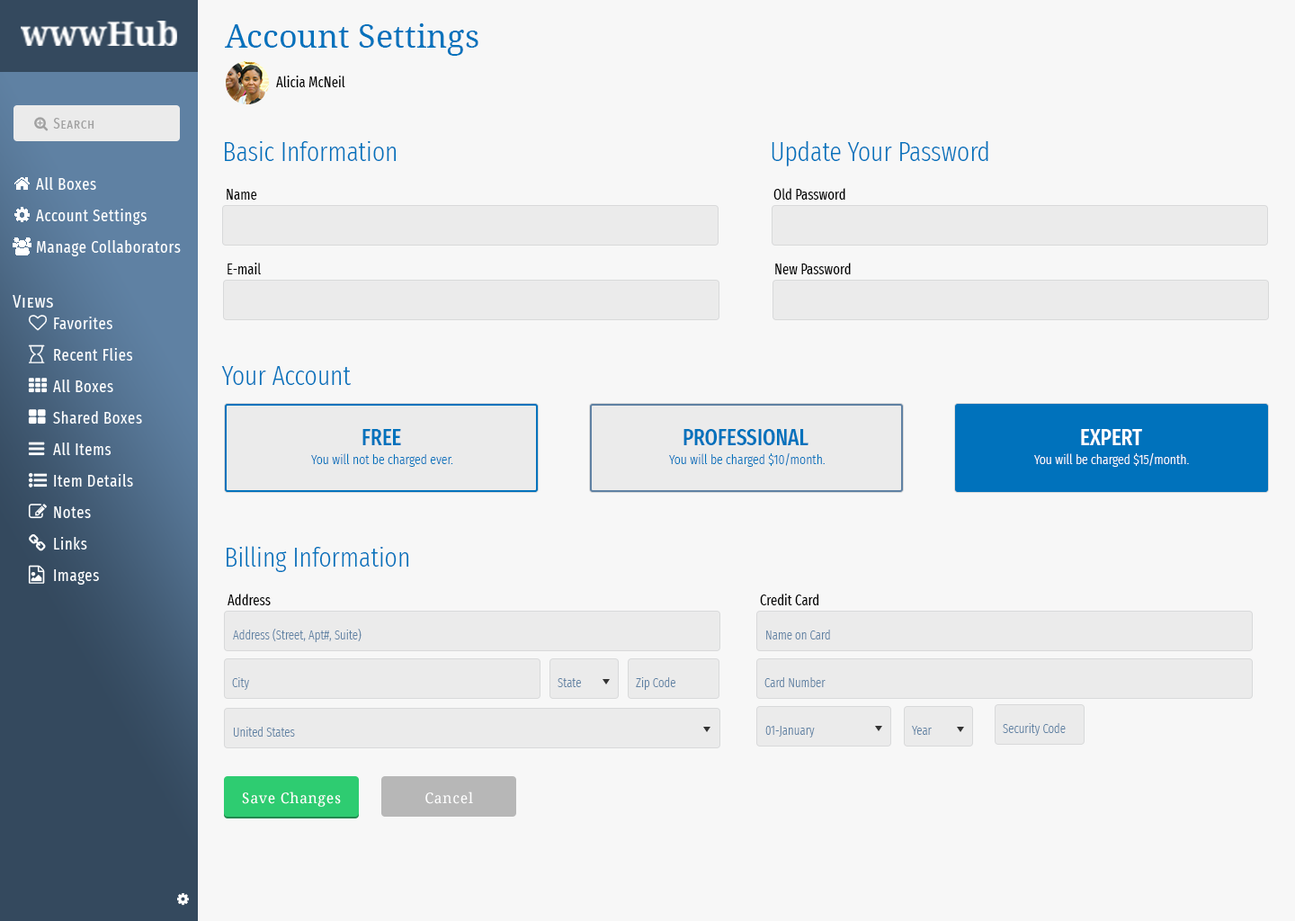
<style>
.page{position:relative;width:1295px;height:921px;background:#f7f7f7}
.page>*{position:absolute;margin:0}
.t1{font:32.4px "DroidSerif";color:#0072bc}
.t2{font:14.4px "FiraSansExtraCondensed-Regular";color:#000000}
.t3{font:27px "FiraSansExtraCondensed-Light";color:#0072bc}
.t4{font:22.5px "FiraSansExtraCondensed-Medium";color:#0072bc}
.t5{font:22.5px "FiraSansExtraCondensed-Medium";color:#ffffff}
.t6{font:13.5px "FiraSansExtraCondensed-Light";color:#0072bc}
.t7{font:13.5px "FiraSansExtraCondensed-Light";color:#ffffff}
.t8{font:12.6px "FiraSansExtraCondensed-Light";color:#5f81a3}
.t9{font:14.4px "DroidSerif";letter-spacing:0.04em;color:#ffffff}
</style>
<div class="page">
<p class="t1" style="left:225px;top:23px;width:253px;height:33px">Account Settings</p>
<p class="t2" style="left:276px;top:76px;width:69px;height:11px">Alicia McNeil</p>
<p class="t3" style="left:225px;top:141px;width:172px;height:20px">Basic Information</p>
<p class="t3" style="left:772px;top:140px;width:216px;height:26px">Update Your Password</p>
<p class="t2" style="left:227px;top:189px;width:30px;height:11px">Name</p>
<p class="t2" style="left:773px;top:188px;width:72px;height:12px">Old Password</p>
<p class="t2" style="left:228px;top:263px;width:33px;height:11px">E-mail</p>
<p class="t2" style="left:775px;top:263px;width:76px;height:11px">New Password</p>
<p class="t3" style="left:221px;top:366px;width:131px;height:19px">Your Account</p>
<p class="t4" style="left:362px;top:429px;width:39px;height:16px">FREE</p>
<p class="t4" style="left:683px;top:429px;width:125px;height:16px">PROFESSIONAL</p>
<p class="t5" style="left:1081px;top:429px;width:61px;height:16px">EXPERT</p>
<p class="t6" style="left:311px;top:453px;width:142px;height:14px">You will not be charged ever.</p>
<p class="t6" style="left:669px;top:452px;width:156px;height:15px">You will be charged $10/month.</p>
<p class="t7" style="left:1034px;top:452px;width:155px;height:15px">You will be charged $15/month.</p>
<p class="t3" style="left:227px;top:546px;width:182px;height:26px">Billing Information</p>
<p class="t2" style="left:228px;top:594px;width:43px;height:11px">Address</p>
<p class="t2" style="left:760px;top:594px;width:59px;height:11px">Credit Card</p>
<p class="t8" style="left:233px;top:629px;width:129px;height:13px">Address (Street, Apt#, Suite)</p>
<p class="t8" style="left:766px;top:629px;width:64px;height:10px">Name on Card</p>
<p class="t8" style="left:232px;top:677px;width:17px;height:13px">City</p>
<p class="t8" style="left:636px;top:677px;width:39px;height:13px">Zip Code</p>
<p class="t8" style="left:764px;top:677px;width:62px;height:10px">Card Number</p>
<p class="t8" style="left:558px;top:678px;width:23px;height:9px">State</p>
<p class="t8" style="left:765px;top:726px;width:50px;height:11px">01-January</p>
<p class="t8" style="left:912px;top:726px;width:20px;height:9px">Year</p>
<p class="t8" style="left:1003px;top:723px;width:63px;height:13px">Security Code</p>
<p class="t8" style="left:234px;top:727px;width:61px;height:9px">United States</p>
<p class="t9" style="left:242px;top:791px;width:99px;height:16px">Save Changes</p>
<p class="t9" style="left:425px;top:791px;width:48px;height:13px">Cancel</p>
</div>
